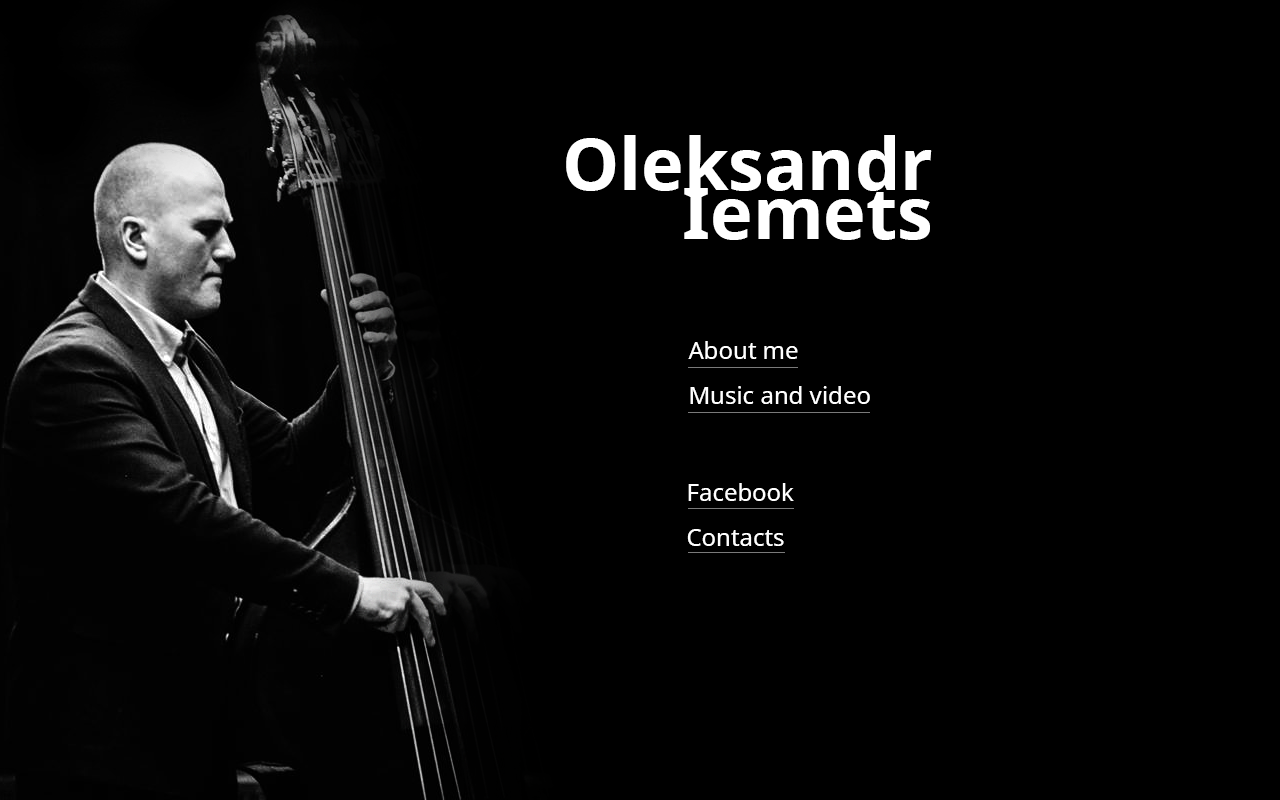
<style>
.page{position:relative;width:1280px;height:800px;background:#000000}
.page>*{position:absolute;margin:0}
.t1{font:72px/49px "NotoSans-Bold";color:#ffffff}
.t2{font:24px/45px "NotoSans";color:#ffffff}
</style>
<div class="page">
<p class="t1" style="left:566px;top:135px;width:366px;height:105px;text-align:right">Oleksandr<br>Iemets</p>
<p class="t2" style="left:688px;top:341px;width:182px;height:63px">About me<br>Music and video</p>
<p class="t2" style="left:687px;top:483px;width:107px;height:63px">Facebook<br>Contacts</p>
</div>
